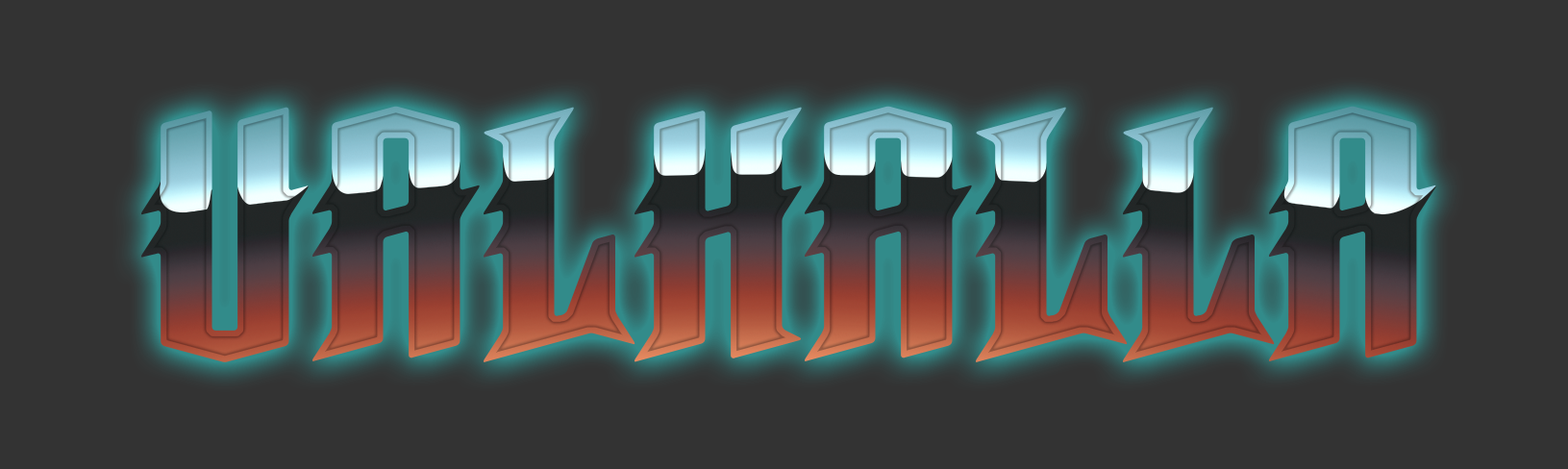
<style>
.page{position:relative;width:1568px;height:469px;background:#333333}
.page>*{position:absolute;margin:0}
.t1{font:427.3px "HauntedWoodsDemo"}
</style>
<div class="page">
<p class="t1" style="left:140px;top:106px;width:1296px;height:256px">VALHALLA</p>
</div>
